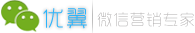
<style>
.page{position:relative;width:195px;height:33px;background:#ffffff}
.page>*{position:absolute;margin:0}
.t1{font:22px "RTWSYueGoTrial-Light";letter-spacing:0.1em;color:#2bb5fd}
.t2{font:15px "RTWSYueGoTrial-ExLight";letter-spacing:0.1em;color:#adaaaa}
</style>
<div class="page">
<p class="t1" style="left:43px;top:8px;width:44px;height:21px">优翼</p>
<p class="t2" style="left:97px;top:12px;width:97px;height:15px">微信营销专家</p>
</div>
